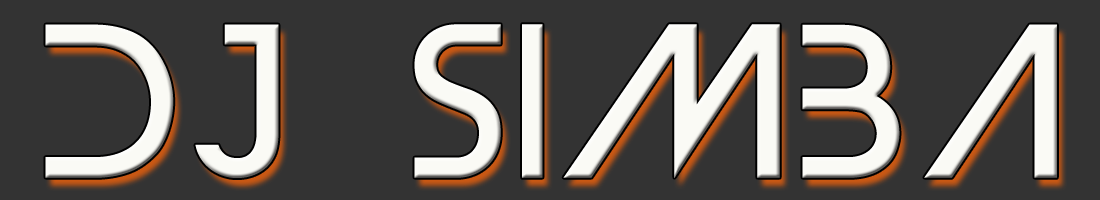
<style>
.page{position:relative;width:1100px;height:200px;background:#333333}
.page>*{position:absolute;margin:0}
.t1{font:204.2px "DevilBreezeMedium";letter-spacing:0.06em;color:#fafaf5}
</style>
<div class="page">
<p class="t1" style="left:45px;top:24px;width:1012px;height:154px">DJ siMBA</p>
</div>
